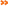
<style>
.page{position:relative;width:8px;height:6px;background:#ffffff}
.page>*{position:absolute;margin:0}
.t1{font:10px "Toonish";color:#f3701a}
</style>
<div class="page">
<p class="t1" style="left:0px;top:0px;width:8px;height:6px">&gt;&gt;</p>
</div>
